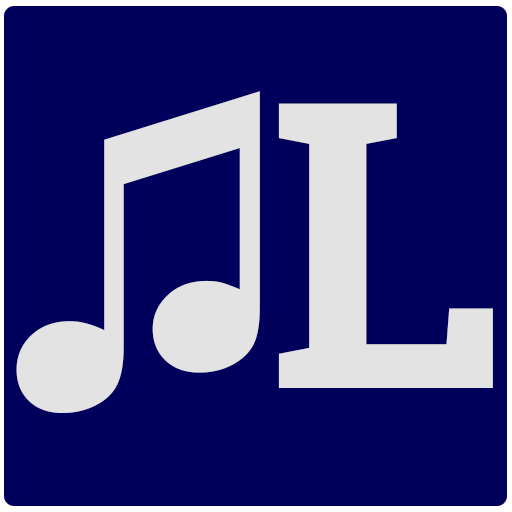
<style>
.page{position:relative;width:512px;height:512px;background:#00005c}
.page>*{position:absolute;margin:0}
.t1{font:400px "Arial-BoldMT";letter-spacing:-0.08em;color:#e3e3e3}
.t2{font:400px "RobotoSlab-Bold";letter-spacing:-0.08em;color:#e3e3e3}
</style>
<div class="page">
<p class="t1" style="left:16px;top:91px;width:477px;height:322px">♫<span class="t2">L</span></p>
</div>
